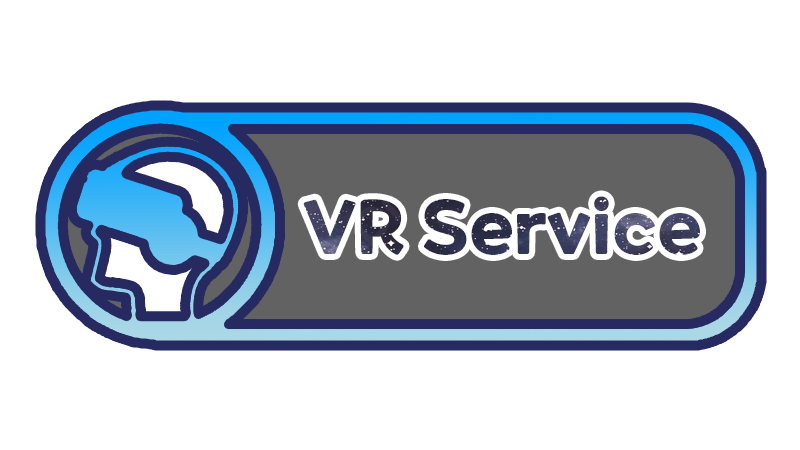
<style>
.page{position:relative;width:800px;height:450px;background:#ffffff}
.page>*{position:absolute;margin:0}
.t1{font:72px "ONEMobilePOPOTFRegular"}
</style>
<div class="page">
<p class="t1" style="left:303px;top:196px;width:397px;height:59px">VR Service</p>
</div>
